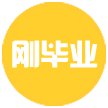
<style>
.page{position:relative;width:108px;height:108px;background:#fecf2d}
.page>*{position:absolute;margin:0}
.t1{font:29px "¹ã½Ý¾ÓÃÔÄã×Ö¿â";color:#ffffff}
</style>
<div class="page">
<p class="t1" style="left:12px;top:40px;width:86px;height:28px">刚毕业</p>
</div>
